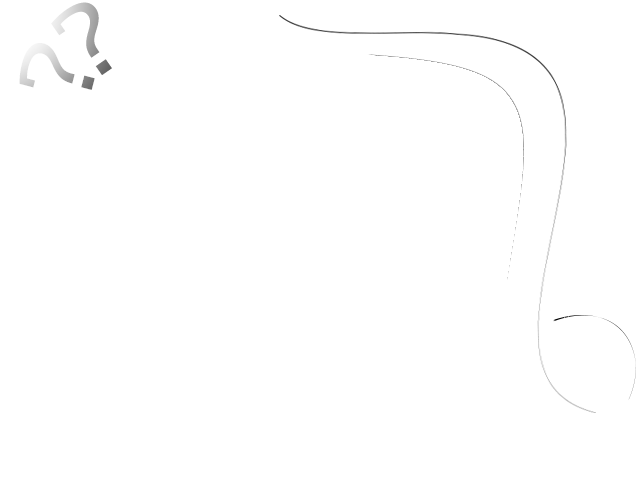
<style>
.page{position:relative;width:640px;height:480px;background:#ffffff}
.page>*{position:absolute;margin:0}
.t1{font:100px "LucidaConsole"}
</style>
<div class="page">
<p class="t1" style="left:19px;top:43px;width:76px;height:47px;rotate:-75deg">?</p>
</div>
